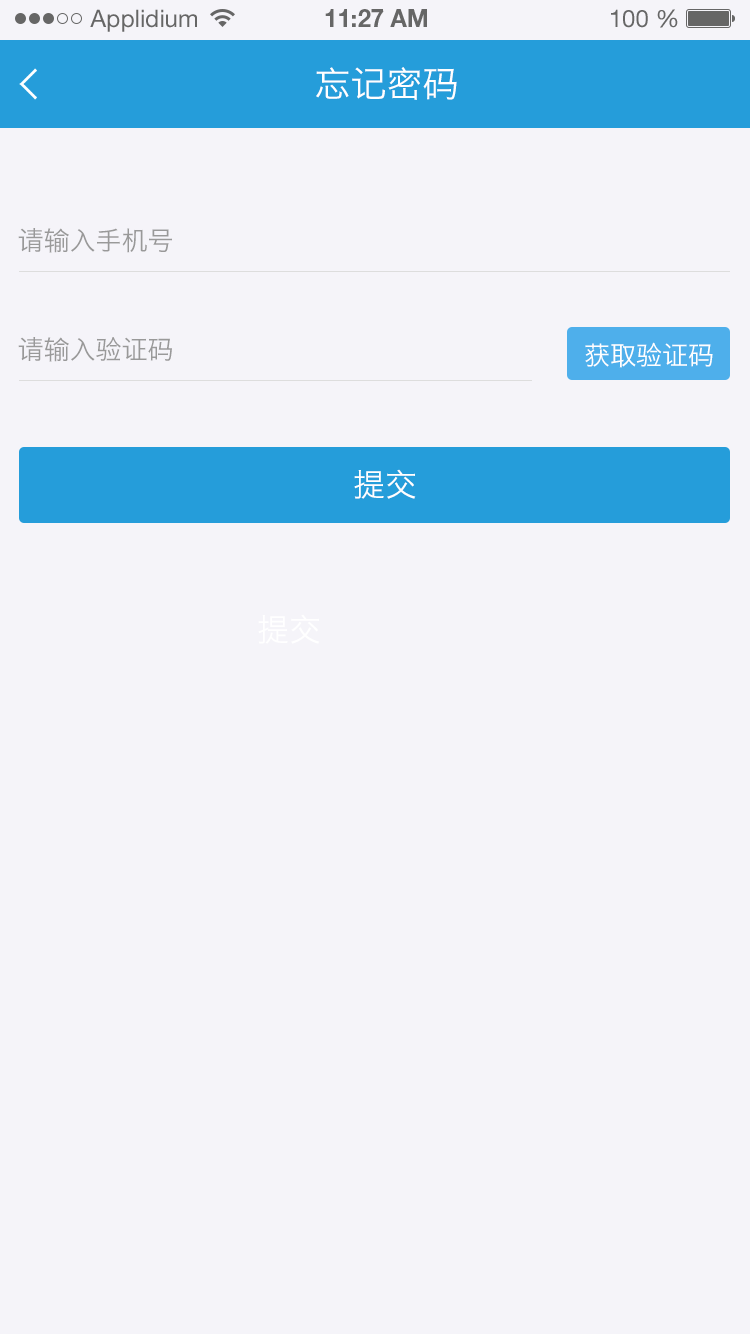
<style>
.page{position:relative;width:750px;height:1334px;background:#f5f4f9}
.page>*{position:absolute;margin:0}
.t1{font:24px "HelveticaNeueLTStd-Roman";color:#666666}
.t2{font:24px "HelveticaNeueLTStd-Bd";color:#666666}
.t3{font:36px "HiraginoSansGB-W3";color:#ffffff;text-transform:uppercase}
.t4{font:26px "HiraginoSansGB-W3";color:#999999;text-transform:uppercase}
.t5{font:26px "HiraginoSansGB-W3";color:#ffffff;text-transform:uppercase}
.t6{font:32px "HiraginoSansGB-W3";color:#ffffff;text-transform:uppercase}
</style>
<div class="page">
<p class="t1" style="left:90px;top:9px;width:107px;height:23px">Applidium</p>
<p class="t2" style="left:325px;top:9px;width:102px;height:18px">11:27 AM</p>
<p class="t1" style="left:611px;top:9px;width:67px;height:19px">100 %</p>
<p class="t3" style="left:316px;top:67px;width:141px;height:33px">忘记密码</p>
<p class="t4" style="left:18px;top:228px;width:154px;height:25px">请输入手机号</p>
<p class="t4" style="left:18px;top:337px;width:154px;height:25px">请输入验证码</p>
<p class="t5" style="left:585px;top:342px;width:128px;height:26px">获取验证码</p>
<p class="t6" style="left:354px;top:469px;width:62px;height:30px">提交</p>
<p class="t6" style="left:258px;top:614px;width:62px;height:30px">提交</p>
</div>
